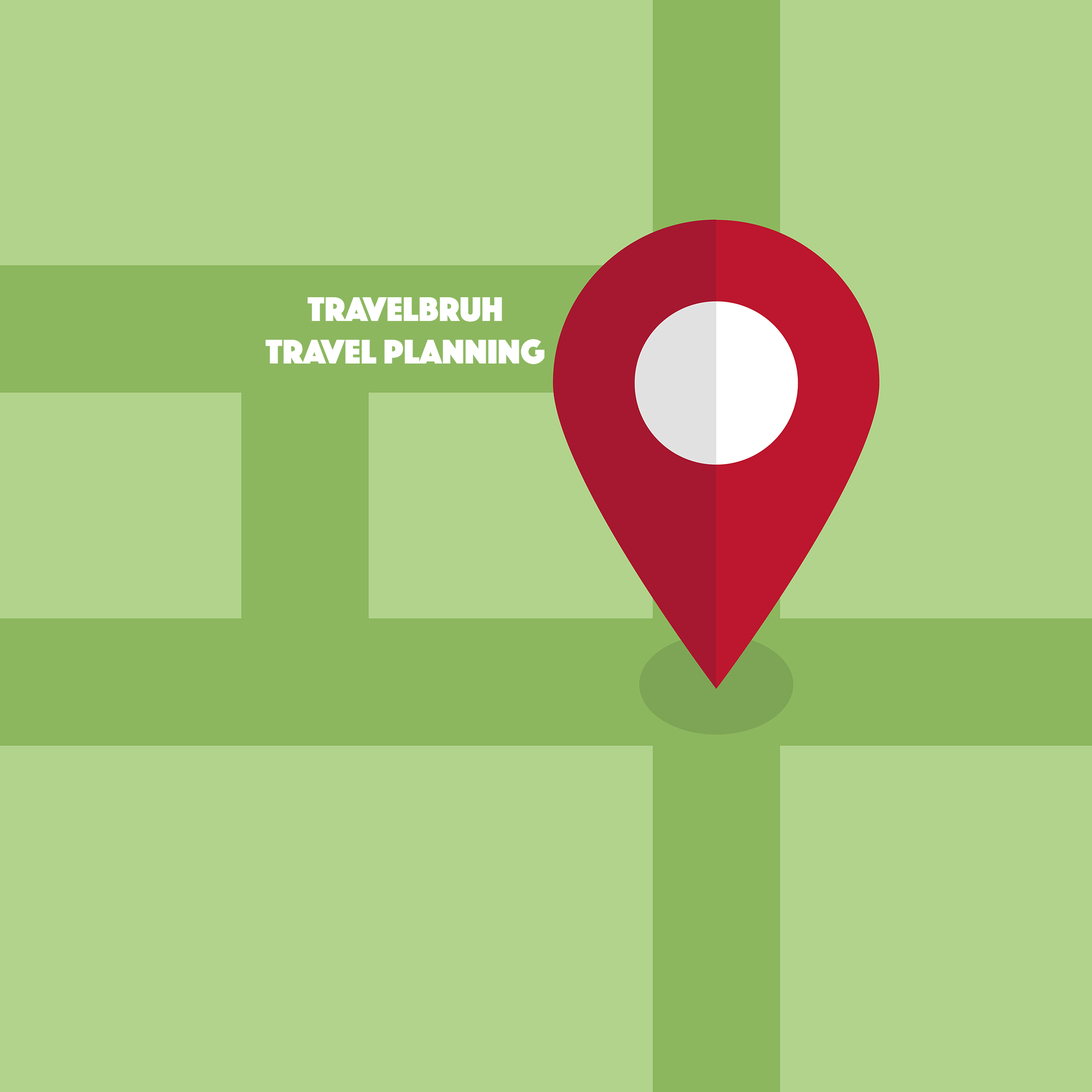
<style>
.page{position:relative;width:1092px;height:1092px;background:#b1d38c}
.page>*{position:absolute;margin:0}
.t1{font:35.6px "Phosphate-Solid";color:#ffffff}
</style>
<div class="page">
<p class="t1" style="left:266px;top:297px;width:279px;height:67px;text-align:center">TravelBruh<br>Travel Planning</p>
</div>
